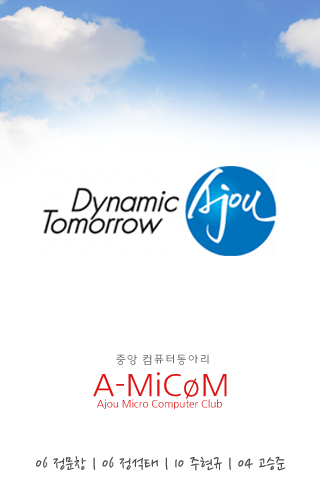
<style>
.page{position:relative;width:320px;height:480px;background:#ffffff}
.page>*{position:absolute;margin:0}
.t1{font:11.4px "HYkanM";color:#6a6a6a}
.t2{font:30.2px "NanumGothic";color:#dd1313}
.t3{font:10.1px "NanumGothic";color:#dd1313}
.t4{font:19px "NanumPen";color:#4b4b4b}
</style>
<div class="page">
<p class="t1" style="left:116px;top:354px;width:93px;height:11px">중앙 컴퓨터동아리</p>
<p class="t2" style="left:93px;top:372px;width:134px;height:27px">A-MiCøM</p>
<p class="t3" style="left:97px;top:399px;width:125px;height:10px">Ajou Micro Computer Club</p>
<p class="t4" style="left:36px;top:456px;width:250px;height:15px">06 정문창 | 06 정석태 | 10 주현규 | 04 고승준</p>
</div>
